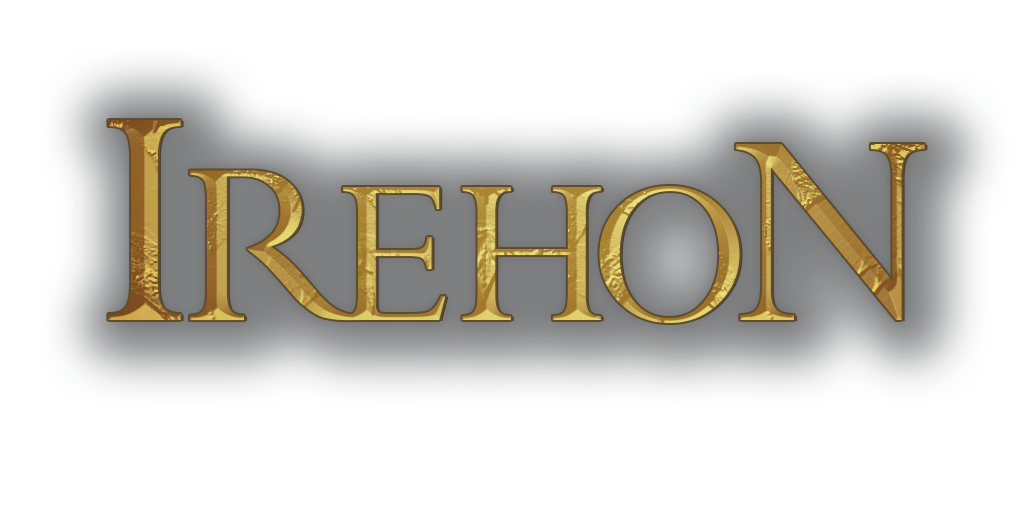
<style>
.page{position:relative;width:1024px;height:512px;background:#ffffff}
.page>*{position:absolute;margin:0}
.t1{font:348.6px "Riven";letter-spacing:-0.025em;text-transform:uppercase}
.t2{font:260.8px "Riven";letter-spacing:-0.005em;text-transform:uppercase}
.t3{font:232.4px "Riven";text-transform:uppercase}
.t4{font:232.4px "Riven";letter-spacing:-0.1em;text-transform:uppercase}
.t5{font:228.2px "Riven";letter-spacing:-0.1em;text-transform:uppercase}
.t6{font:308.2px "Riven";letter-spacing:-0.1em;text-transform:uppercase}
</style>
<div class="page">
<p class="t1" style="left:108px;top:120px;width:817px;height:203px">i<span class="t2">r</span><span class="t3">e</span><span class="t4">h</span><span class="t5">o</span><span class="t6">N</span></p>
</div>
